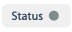
<style>
.page{position:relative;width:72px;height:32px;background:#f0f0f0}
.page>*{position:absolute;margin:0}
.t1{font:12px "MyriadPro-Regular";letter-spacing:0.01em;color:#34495e}
</style>
<div class="page">
<p class="t1" style="left:11px;top:11px;width:32px;height:9px">Status</p>
</div>
